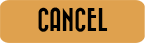
<style>
.page{position:relative;width:145px;height:43px;background:#dfa14e}
.page>*{position:absolute;margin:0}
.t1{font:24px "Bazar";color:#000000}
</style>
<div class="page">
<p class="t1" style="left:38px;top:7px;width:70px;height:25px">CANCEL</p>
</div>
